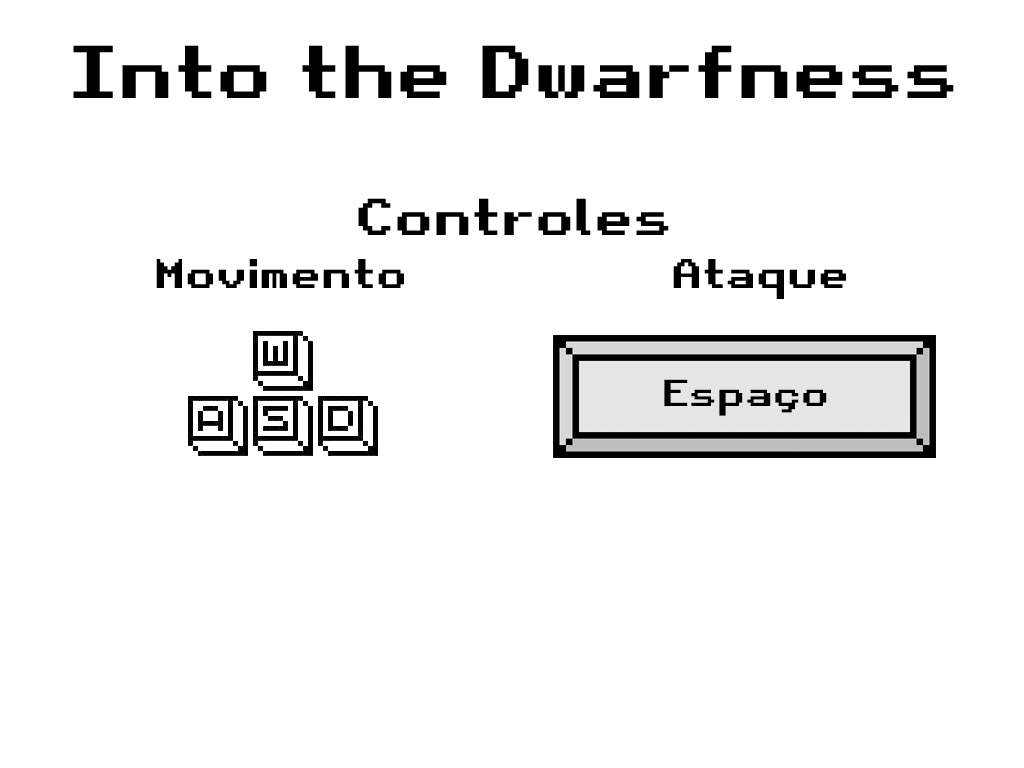
<style>
.page{position:relative;width:1024px;height:768px;background:#ffffff}
.page>*{position:absolute;margin:0}
.t1{font:72px "RetroGaming";color:#000000}
.t2{font:50px "RetroGaming";color:#000000}
.t3{font:40px "RetroGaming";color:#000000}
.t4{font:36px "RetroGaming";color:#000000}
</style>
<div class="page">
<p class="t1" style="left:73px;top:45px;width:881px;height:53px">Into the Dwarfness</p>
<p class="t2" style="left:358px;top:198px;width:311px;height:37px">Controles</p>
<p class="t3" style="left:156px;top:259px;width:248px;height:29px">Movimento</p>
<p class="t3" style="left:673px;top:259px;width:173px;height:40px">Ataque</p>
<p class="t4" style="left:664px;top:379px;width:163px;height:37px">Espaço</p>
</div>
